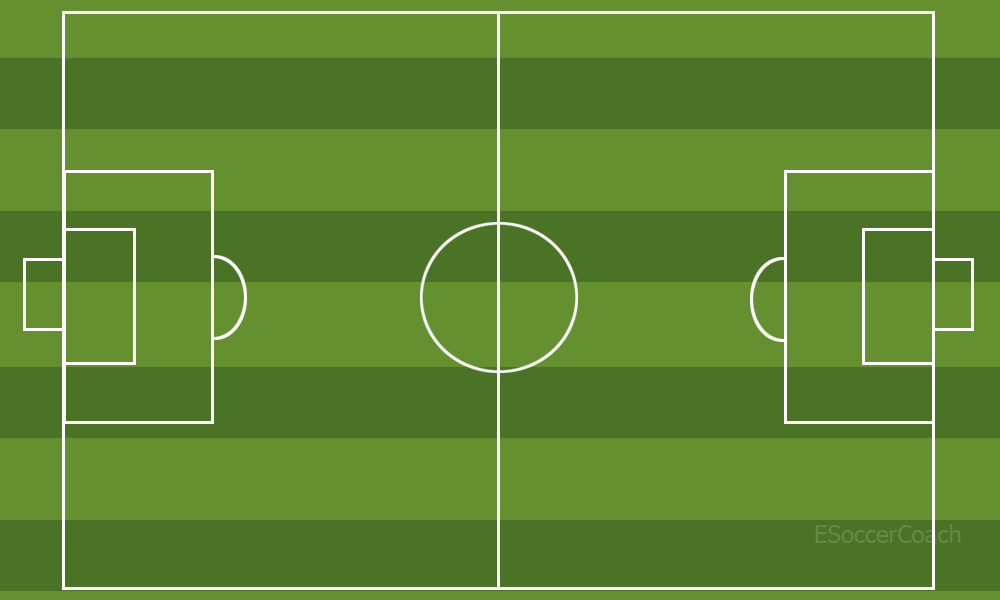
<style>
.page{position:relative;width:1000px;height:600px;background:#64902f}
.page>*{position:absolute;margin:0}
.t1{font:24px "Tahoma";color:#658845}
</style>
<div class="page">
<p class="t1" style="left:815px;top:524px;width:146px;height:19px">ESoccerCoach</p>
</div>
